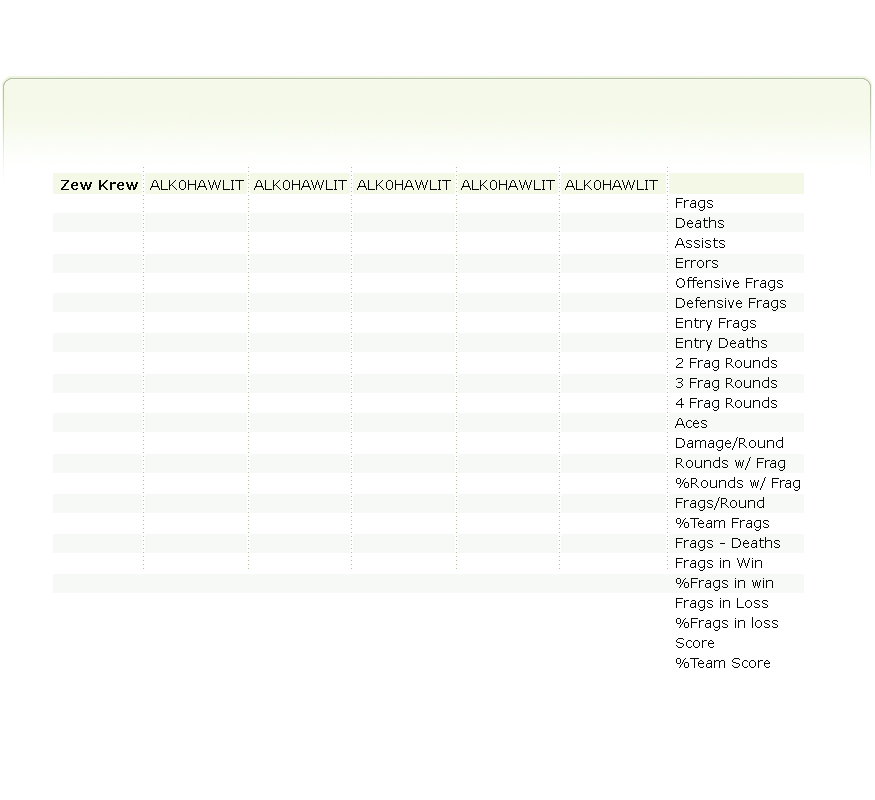
<style>
.page{position:relative;width:875px;height:800px;background:#ffffff}
.page>*{position:absolute;margin:0}
.t1{font:14px "Verdana-Bold";color:#050606}
.t2{font:14px "Verdana";color:#050606}
.t3{font:14px/20px "Verdana";color:#050606}
</style>
<div class="page">
<p class="t1" style="left:61px;top:180px;width:77px;height:10px">Zew Krew</p>
<p class="t2" style="left:150px;top:180px;width:508px;height:10px">ALK0HAWLIT  ALK0HAWLIT  ALK0HAWLIT  ALK0HAWLIT  ALK0HAWLIT</p>
<p class="t3" style="left:675px;top:198px;width:125px;height:470px">Frags<br>Deaths<br>Assists<br>Errors<br>Offensive Frags<br>Defensive Frags<br>Entry Frags<br>Entry Deaths<br>2 Frag Rounds<br>3 Frag Rounds<br>4 Frag Rounds<br>Aces<br>Damage/Round<br>Rounds w/ Frag<br>%Rounds w/ Frag<br>Frags/Round<br>%Team Frags<br>Frags - Deaths<br>Frags in Win<br>%Frags in win<br>Frags in Loss<br>%Frags in loss<br>Score<br>%Team Score</p>
</div>
